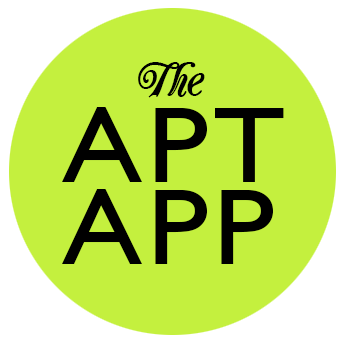
<style>
.page{position:relative;width:344px;height:344px;background:#c4f03e}
.page>*{position:absolute;margin:0}
.t1{font:48px "Carrington";color:#000000}
.t2{font:109.2px/82px "GillSans";letter-spacing:0.04em;color:#000000;scale:1.1 1}
</style>
<div class="page">
<p class="t1" style="left:138px;top:62px;width:67px;height:36px">The</p>
<p class="t2" style="left:62px;top:107px;width:222px;height:157px">APT<br>APP</p>
</div>
